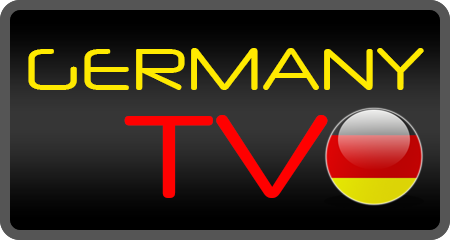
<style>
.page{position:relative;width:450px;height:240px}
.page>*{position:absolute;margin:0}
.t1{font:60px "NeuropolXRg-Regular";color:#ffea00}
.t2{font:120px "NeuropolXRg-Regular";color:#ff0000}
</style>
<div class="page">
<p class="t1" style="left:28px;top:48px;width:396px;height:42px">GERMANY</p>
<p class="t2" style="left:124px;top:115px;width:204px;height:83px">TV</p>
</div>
